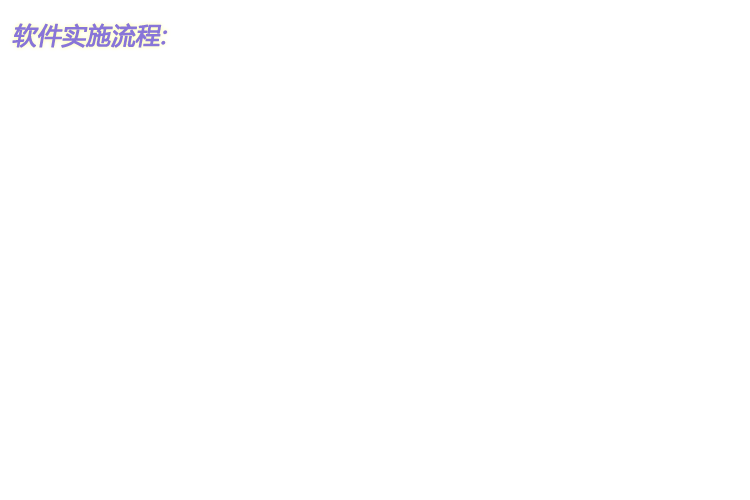
<style>
.page{position:relative;width:750px;height:500px;background:#ffffff}
.page>*{position:absolute;margin:0}
.t1{font:24px "MicrosoftYaHei";color:#8875d8;font-weight:bold;font-style:italic}
</style>
<div class="page">
<p class="t1" style="left:12px;top:23px;width:156px;height:25px">软件实施流程:</p>
</div>
